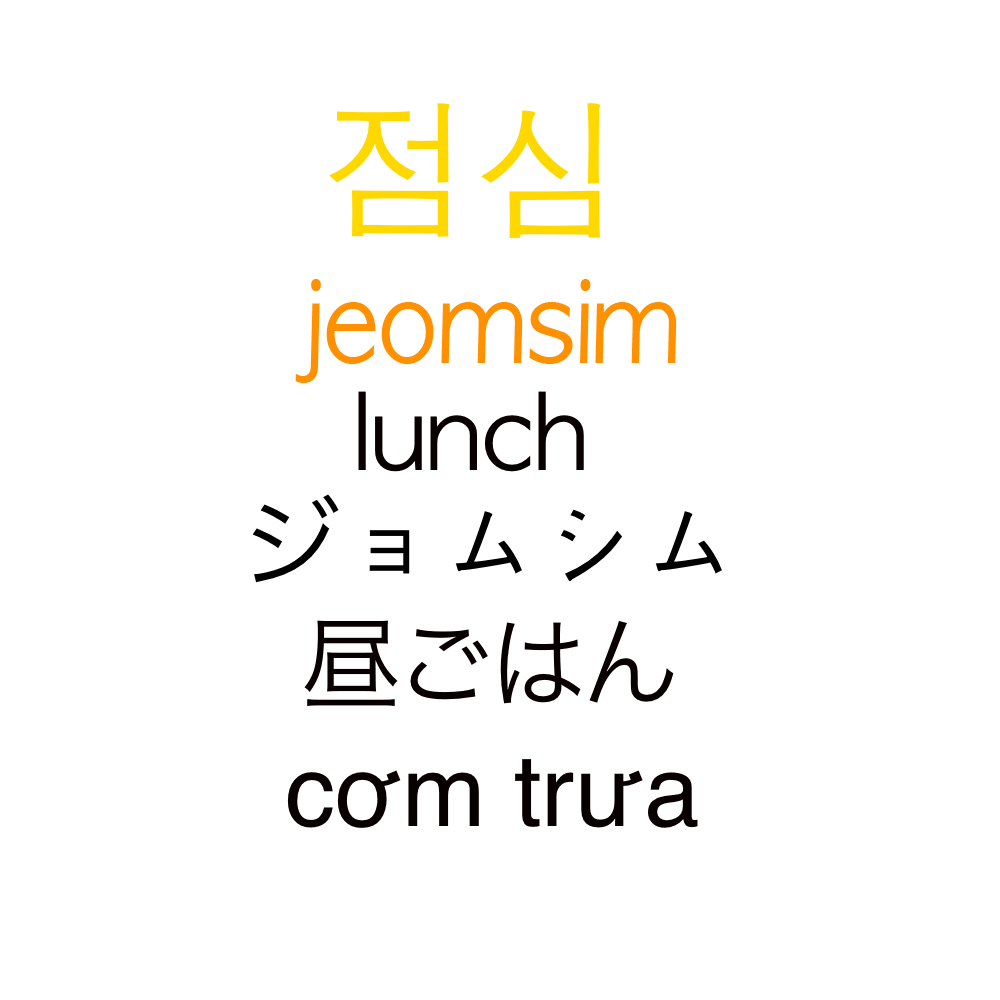
<style>
.page{position:relative;width:1000px;height:1000px;background:#ffffff}
.page>*{position:absolute;margin:0}
.t1{font:150px "AppleGothic";color:#ffd800}
.t2{font:111.2px "AppleGothic";color:#ff9000;scale:0.9 1}
.t3{font:100px "AppleGothic";color:#080000}
.t4{font:100px "AppleGothic";color:#000000}
.t5{font:100px "HiraKakuProN-W3";color:#000000}
.t6{font:100px "HiraKakuProN-W3";color:#080000}
.t7{font:100px "Helvetica";color:#080000}
</style>
<div class="page">
<p class="t1" style="left:329px;top:103px;width:271px;height:135px">점심</p>
<p class="t2" style="left:295px;top:279px;width:382px;height:104px">jeomsim</p>
<p class="t3" style="left:358px;top:391px;width:226px;height:81px">lunch</p>
<p class="t4" style="left:252px;top:494px;width:470px;height:89px"><span class="t5">ジ</span>ョムシム</p>
<p class="t6" style="left:304px;top:620px;width:370px;height:86px">昼ごはん</p>
<p class="t7" style="left:287px;top:759px;width:411px;height:69px">cơm trưa</p>
</div>
